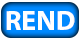
<style>
.page{position:relative;width:80px;height:40px;background:#ffffff}
.page>*{position:absolute;margin:0}
.t1{font:28px "MyriadPro-Bold";color:#ffffff}
</style>
<div class="page">
<p class="t1" style="left:6px;top:11px;width:69px;height:19px">REND</p>
</div>
